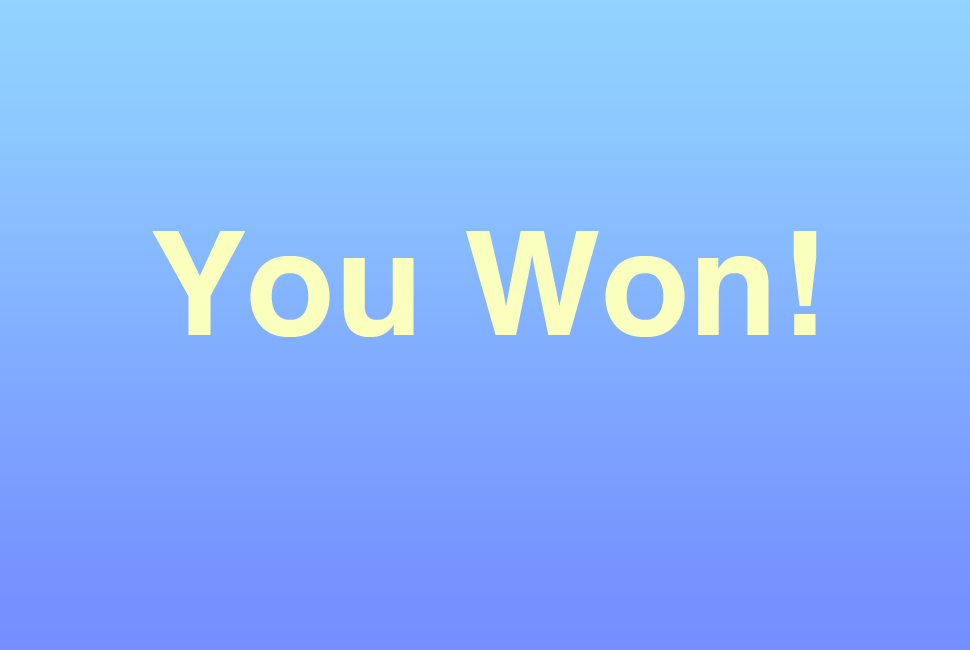
<style>
.page{position:relative;width:970px;height:650px}
.page>*{position:absolute;margin:0}
.t1{font:144.9px "Helvetica-Bold";color:#faffbd}
</style>
<div class="page">
<p class="t1" style="left:152px;top:231px;width:665px;height:106px">You Won!</p>
</div>
